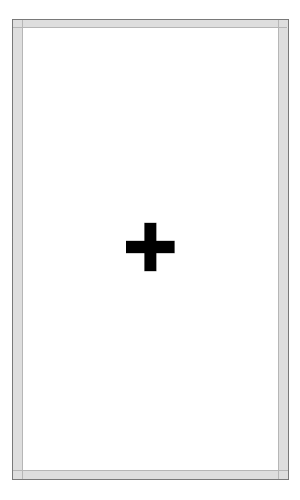
<style>
.page{position:relative;width:300px;height:500px;background:#ffffff}
.page>*{position:absolute;margin:0}
.t1{font:100px "SegoeUIBlack";color:#000000}
</style>
<div class="page">
<p class="t1" style="left:126px;top:222px;width:49px;height:50px">+</p>
</div>
